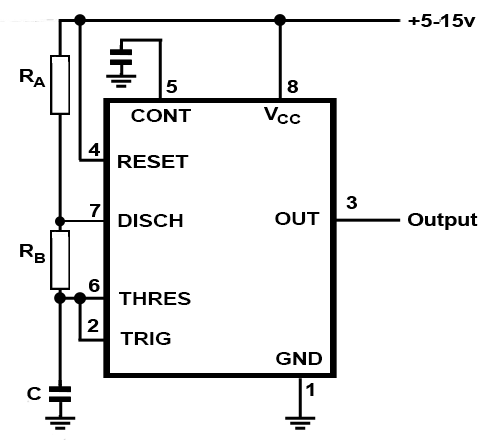
<style>
.page{position:relative;width:480px;height:440px;background:#ffffff}
.page>*{position:absolute;margin:0}
.t1{font:17.9px "Arial-BoldMT";color:#000000;scale:1.2 1}
.t2{font:13.9px "Arial-BoldMT";color:#000000;scale:1.2 1}
</style>
<div class="page">
<p class="t1" style="left:408px;top:14px;width:68px;height:13px">+5-15v</p>
<p class="t1" style="left:20px;top:69px;width:15px;height:13px">R</p>
<p class="t2" style="left:33px;top:77px;width:13px;height:10px">A</p>
<p class="t1" style="left:166px;top:80px;width:11px;height:13px">5</p>
<p class="t1" style="left:131px;top:109px;width:60px;height:13px">CONT</p>
<p class="t2" style="left:277px;top:114px;width:24px;height:10px">CC</p>
<p class="t1" style="left:88px;top:143px;width:12px;height:13px">4</p>
<p class="t1" style="left:346px;top:196px;width:11px;height:13px">3</p>
<p class="t1" style="left:90px;top:204px;width:11px;height:13px">7</p>
<p class="t1" style="left:118px;top:214px;width:65px;height:13px">DISCH</p>
<p class="t1" style="left:275px;top:212px;width:45px;height:13px">OUT</p>
<p class="t1" style="left:408px;top:213px;width:70px;height:17px">Output</p>
<p class="t2" style="left:35px;top:253px;width:10px;height:10px">B</p>
<p class="t1" style="left:89px;top:279px;width:11px;height:13px">6</p>
<p class="t1" style="left:119px;top:292px;width:72px;height:13px">THRES</p>
<p class="t1" style="left:87px;top:319px;width:12px;height:13px">2</p>
<p class="t1" style="left:120px;top:332px;width:51px;height:13px">TRIG</p>
<p class="t1" style="left:276px;top:352px;width:46px;height:13px">GND</p>
<p class="t1" style="left:306px;top:383px;width:8px;height:13px">1</p>
</div>
